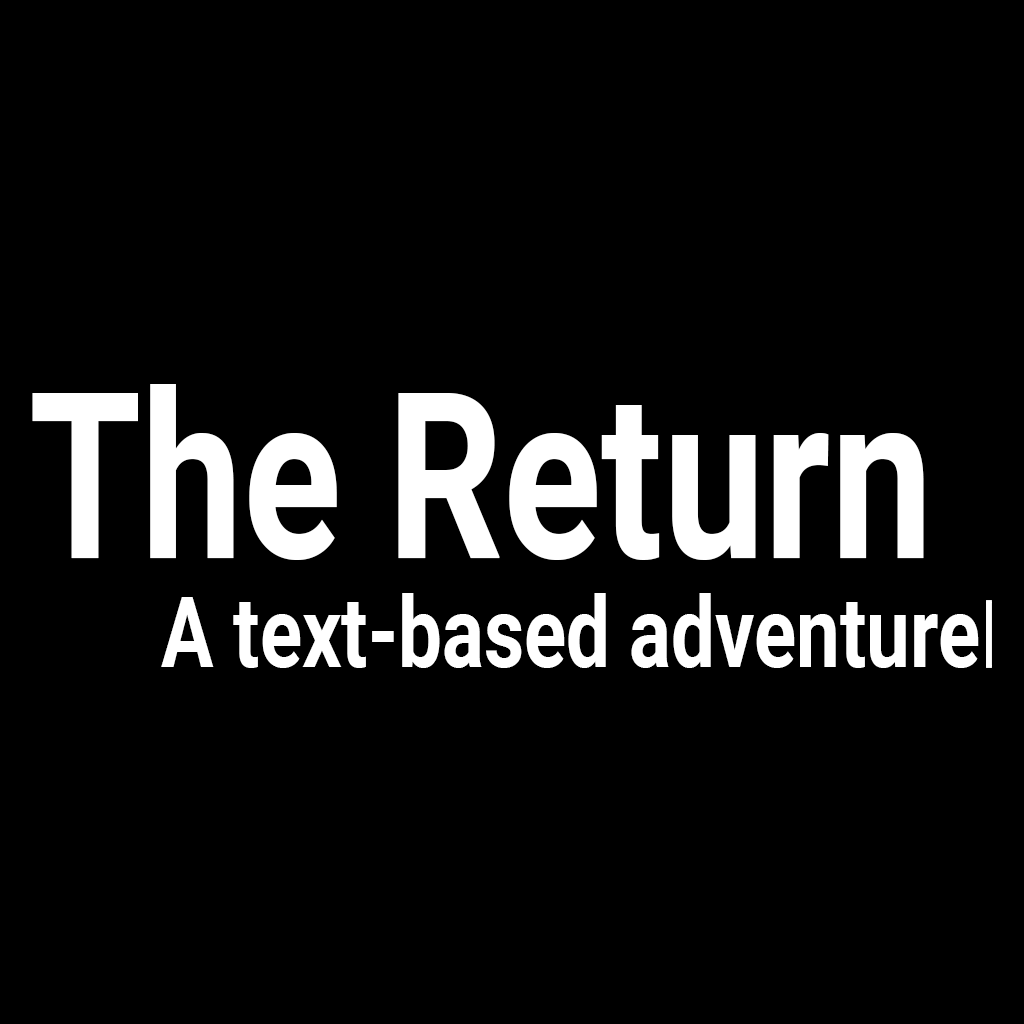
<style>
.page{position:relative;width:1024px;height:1024px;background:#000000}
.page>*{position:absolute;margin:0}
.t1{font:232px "Roboto-Bold";color:#ffffff;scale:0.78 1}
.t2{font:99.4px "Roboto-Bold";color:#ffffff;scale:0.78 1}
</style>
<div class="page">
<p class="t1" style="left:32px;top:384px;width:892px;height:176px">The Return</p>
<p class="t2" style="left:161px;top:593px;width:818px;height:75px">A text-based adventure</p>
</div>
